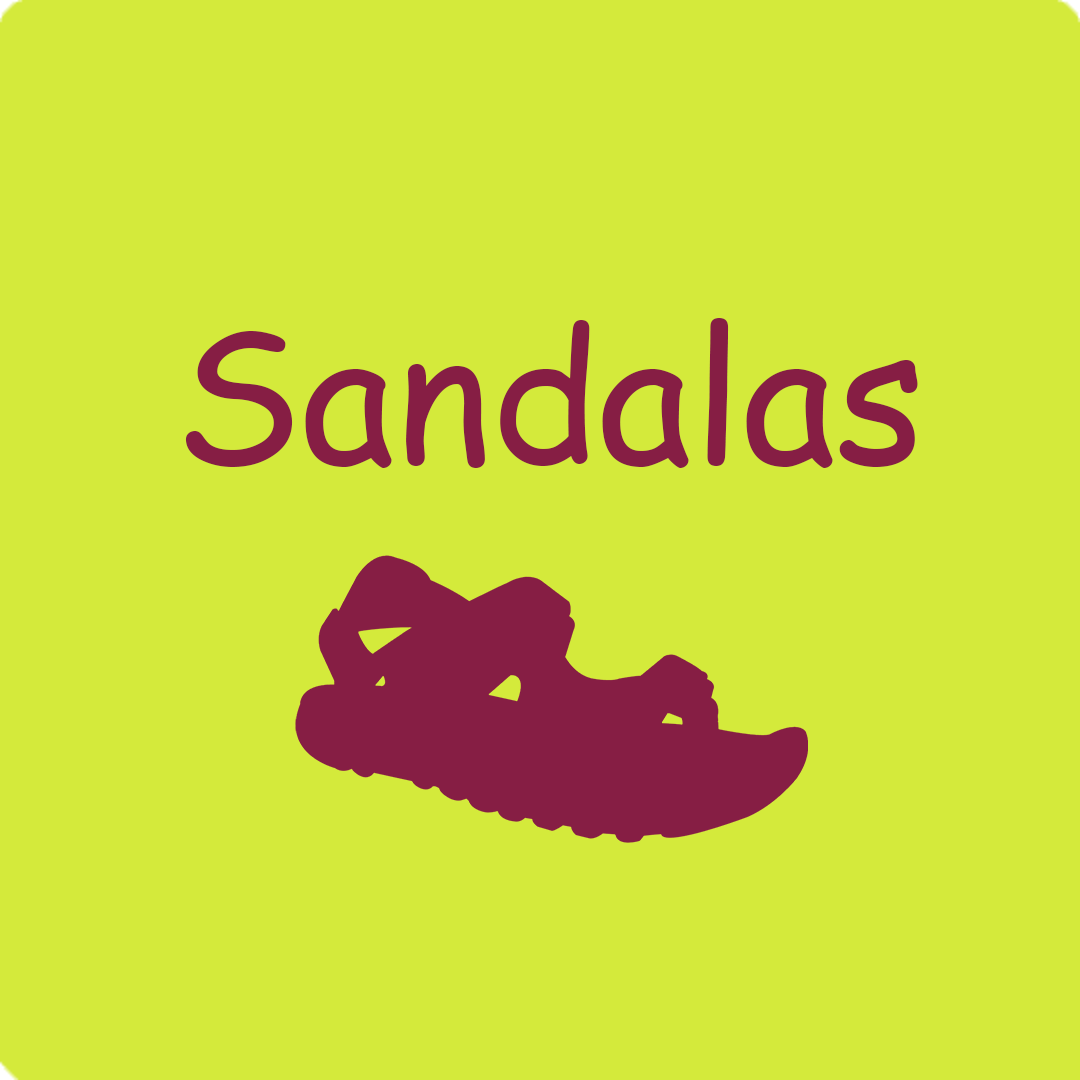
<style>
.page{position:relative;width:1080px;height:1080px;background:#d4ea3b}
.page>*{position:absolute;margin:0}
.t1{font:183.3px "ComicSansMS";color:#861e44}
</style>
<div class="page">
<p class="t1" style="left:185px;top:318px;width:733px;height:150px">Sandalas</p>
</div>
